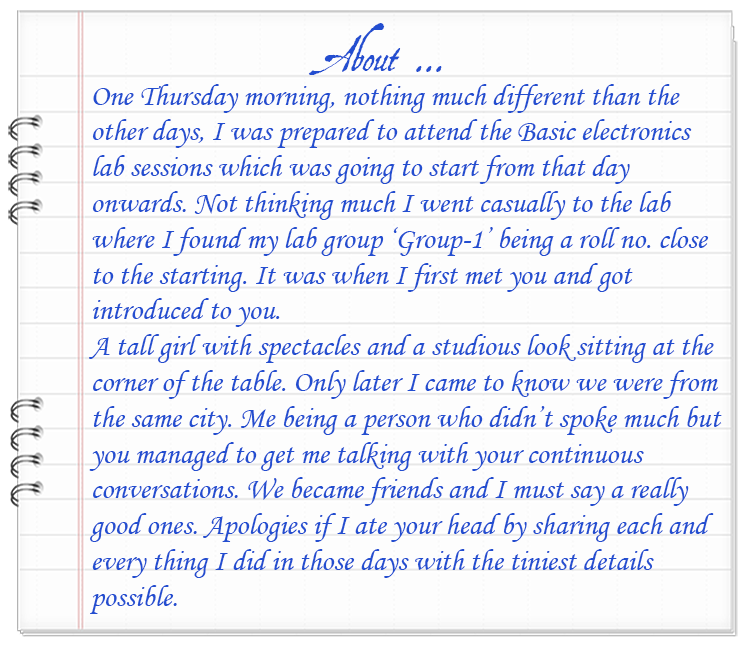
<style>
.page{position:relative;width:750px;height:646px;background:#fdfdfd}
.page>*{position:absolute;margin:0}
.t1{font:42.2px "AquilineTwo";color:#234ed0}
.t2{font:29.8px "MonotypeCorsiva";color:#234ed0}
</style>
<div class="page">
<p class="t1" style="left:308px;top:23px;width:134px;height:52px">About ...</p>
<p class="t2" style="left:89px;top:84px;width:633px;height:530px">One Thursday morning, nothing much different than the other days, I was prepared to attend the Basic electronics lab sessions which was going to start from that day          onwards. Not thinking much I went casually to the lab where I found my lab group ‘Group-1’ being a roll no. close to the starting. It was when I first met you and got     introduced to you.<br>A tall girl with spectacles and a studious look sitting at the corner of the table. Only later I came to know we were from the same city. Me being a person who didn’t spoke much but you managed to get me talking with your continuous    conversations. We became friends and I must say a really good ones. Apologies if I ate your head by sharing each and every thing I did in those days with the tiniest details     possible.</p>
</div>
